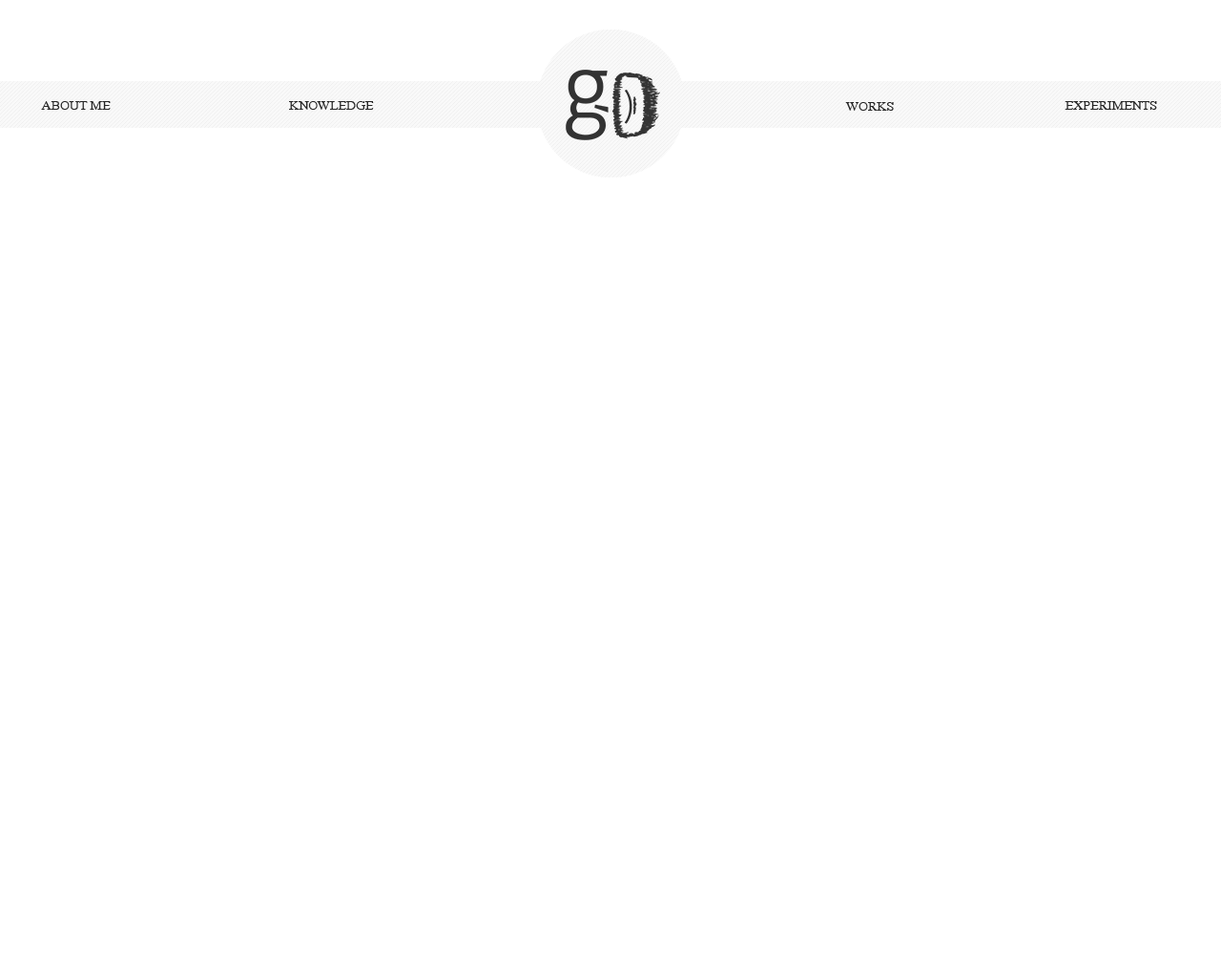
<style>
.page{position:relative;width:1221px;height:977px;background:#ffffff}
.page>*{position:absolute;margin:0}
.t1{font:13.4px "FrankRuehl";color:#262626}
</style>
<div class="page">
<p class="t1" style="left:41px;top:101px;width:70px;height:9px">ABOUT ME</p>
<p class="t1" style="left:289px;top:101px;width:85px;height:9px">KNOWLEDGE</p>
<p class="t1" style="left:1064px;top:101px;width:93px;height:9px">EXPERIMENTS</p>
<p class="t1" style="left:845px;top:102px;width:49px;height:9px">WORKS</p>
</div>
